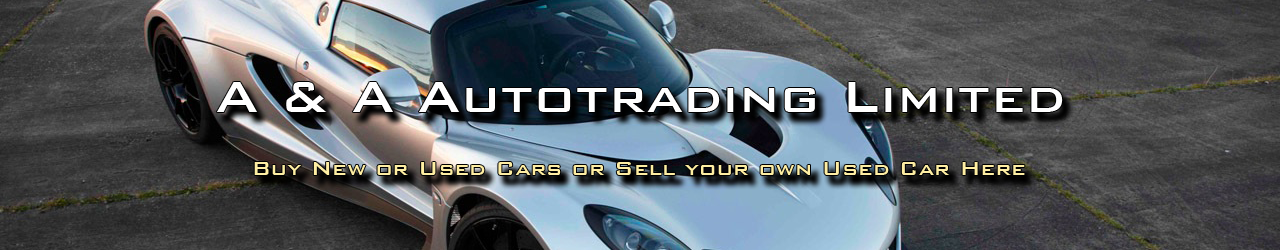
<style>
.page{position:relative;width:1280px;height:250px}
.page>*{position:absolute;margin:0}
.t1{font:57.2px "BankGothicBT-Medium";color:#ffffff}
.t2{font:24.3px "BankGothicBT-Medium";color:#feeea3}
</style>
<div class="page">
<p class="t1" style="left:216px;top:82px;width:847px;height:30px">A &amp; A Autotrading Limited</p>
<p class="t2" style="left:254px;top:162px;width:771px;height:13px">Buy New or Used Cars or Sell your own Used Car Here</p>
</div>
